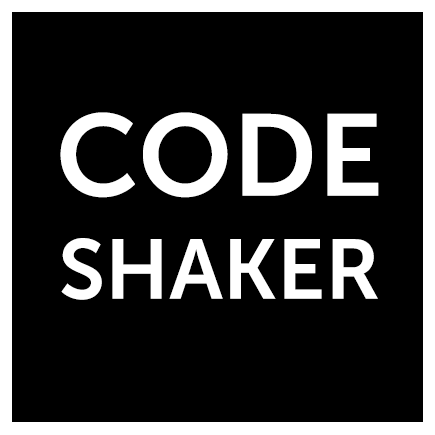
<style>
.page{position:relative;width:435px;height:435px;background:#000000}
.page>*{position:absolute;margin:0}
.t1{font:115px "MuseoSans-700";color:#ffffff}
.t2{font:84px "MuseoSans-700";color:#ffffff}
</style>
<div class="page">
<p class="t1" style="left:60px;top:112px;width:319px;height:86px">CODE</p>
<p class="t2" style="left:61px;top:238px;width:317px;height:62px">SHAKER</p>
</div>
